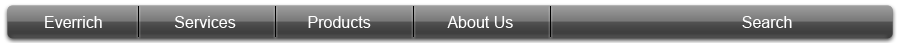
<style>
.page{position:relative;width:903px;height:43px}
.page>*{position:absolute;margin:0}
.t1{font:16px "ArialMT";color:#ffffff}
</style>
<div class="page">
<p class="t1" style="left:45px;top:16px;width:57px;height:12px">Everrich</p>
<p class="t1" style="left:175px;top:16px;width:61px;height:12px">Services</p>
<p class="t1" style="left:308px;top:16px;width:63px;height:12px">Products</p>
<p class="t1" style="left:447px;top:16px;width:66px;height:12px">About Us</p>
<p class="t1" style="left:742px;top:16px;width:50px;height:12px">Search</p>
</div>
